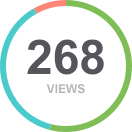
<style>
.page{position:relative;width:132px;height:132px;background:#ffffff}
.page>*{position:absolute;margin:0}
.t1{font:12px/19px "Arial-BoldMT";color:#b4b7bb;text-transform:uppercase}
.t2{font:48px/19px "Arial-BoldMT";color:#54565c}
</style>
<div class="page">
<p class="t1" style="left:27px;top:39px;width:77px;height:55px;text-align:center"><span class="t2">268<br></span>views</p>
</div>
